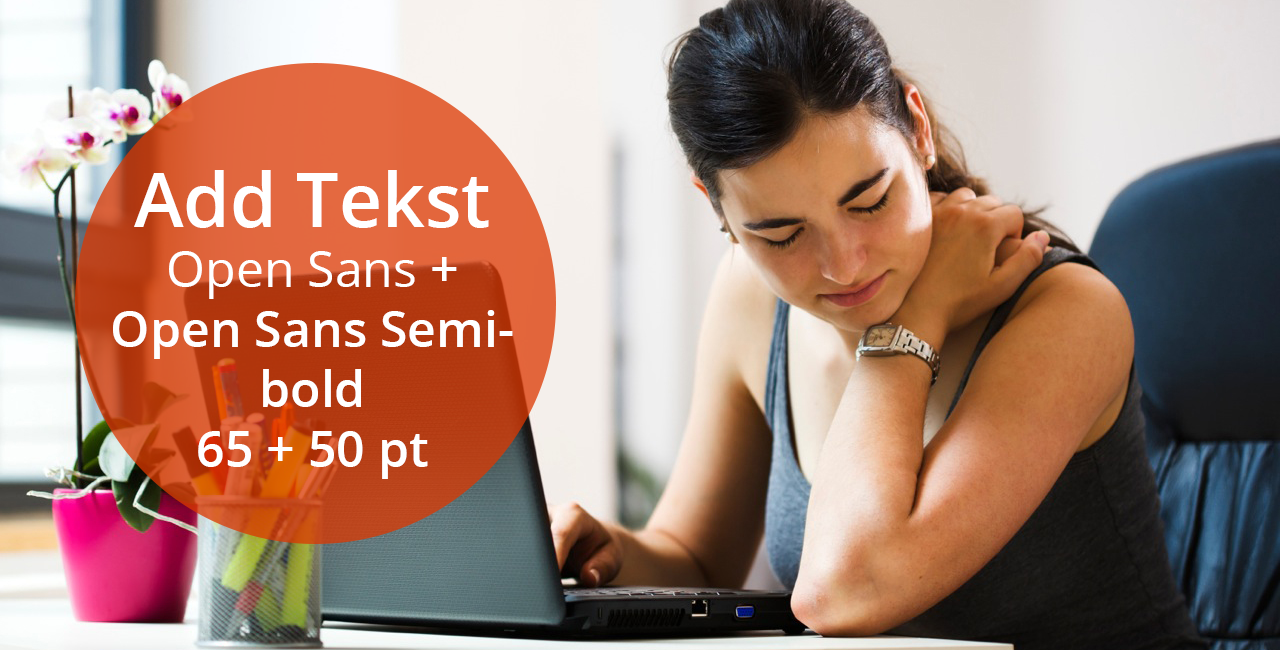
<style>
.page{position:relative;width:1280px;height:650px}
.page>*{position:absolute;margin:0}
.t1{font:50px "OpenSans-Semibold";color:#ffffff}
.t2{font:75px "OpenSans-Semibold";color:#ffffff}
.t3{font:50px "OpenSans";color:#ffffff}
</style>
<div class="page">
<p class="t1" style="left:113px;top:170px;width:400px;height:309px;text-align:center"><span class="t2">Add Tekst </span><span class="t3">Open Sans</span> + Open Sans Semibold<br>65 + 50 pt</p>
</div>
